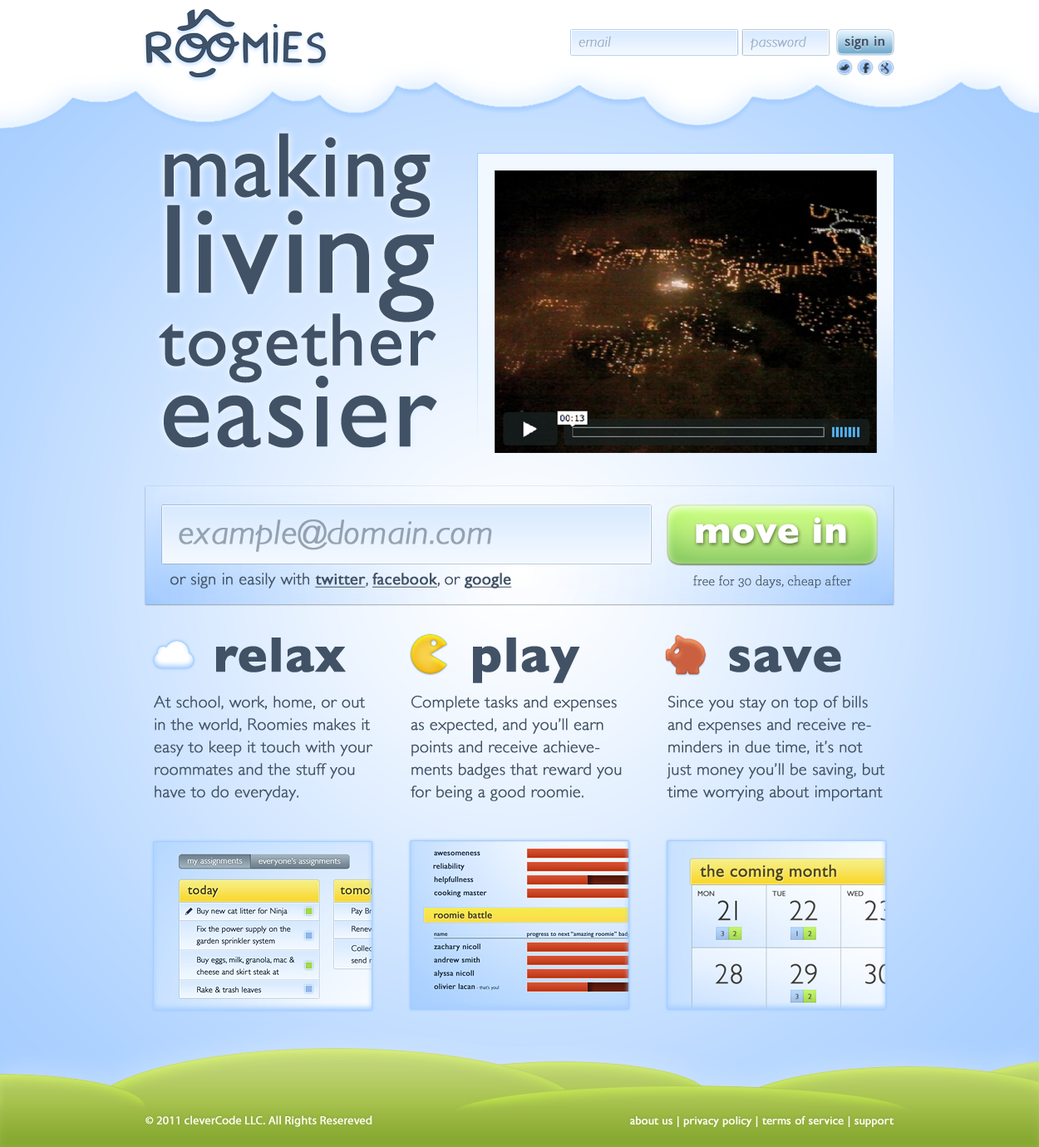
<style>
.page{position:relative;width:1039px;height:1147px}
.page>*{position:absolute;margin:0}
.t1{font:15px "GillSans-LightItalic";color:#96adca;font-weight:bold}
.t2{font:15px "GillSans";color:#425266;font-weight:bold}
.t3{font:74.8px/72.8px "GillSans";color:#425266;font-weight:bold}
.t4{font:91.5px/54.5px "GillSans";color:#425266;font-weight:bold}
.t5{font:127.2px/96.1px "GillSans";color:#425266;font-weight:bold}
.t6{font:109.7px/81.1px "GillSans";color:#425266;font-weight:bold}
.t7{font:34.9px "GillSans-LightItalic";color:#94a1b2;font-weight:bold}
.t8{font:36.6px "GillSans-Bold";color:#ffffff;font-weight:bold}
.t9{font:16.6px "GillSans-Light";color:#425266;font-weight:bold}
.t10{font:16.6px "GillSans";color:#425266;font-weight:bold;text-decoration:underline}
.t11{font:13.3px "Archer-Light";color:#425266;font-weight:bold}
.t12{font:49.9px "GillSans-Bold";color:#425266;font-weight:bold}
.t13{font:16.6px/22.4px "GillSans-Light";color:#425266;font-weight:bold}
.t14{font:11.6px "MyriadPro-Regular";color:#f9ffe5;font-weight:bold}
.t15{font:11.6px "GillSans";color:#f9ffe5;font-weight:bold}
</style>
<div class="page">
<p class="t1" style="left:579px;top:36px;width:32px;height:11px">email</p>
<p class="t1" style="left:751px;top:36px;width:55px;height:15px">password</p>
<p class="t2" style="left:845px;top:36px;width:40px;height:14px">sign in</p>
<p class="t3" style="left:159px;top:133px;width:278px;height:315px"><span class="t4">making<br></span><span class="t5">living<br></span>together<br><span class="t6">easier</span></p>
<p class="t7" style="left:179px;top:520px;width:313px;height:32px">example@domain.com</p>
<p class="t8" style="left:696px;top:517px;width:150px;height:27px">move in</p>
<p class="t9" style="left:170px;top:573px;width:342px;height:16px">or sign in easily with <span class="t10">twitter</span>, <span class="t10">facebook</span>, or <span class="t10">google</span></p>
<p class="t11" style="left:693px;top:575px;width:158px;height:14px">free for 30 days, cheap after</p>
<p class="t12" style="left:216px;top:638px;width:130px;height:35px">relax</p>
<p class="t12" style="left:473px;top:638px;width:107px;height:45px">play</p>
<p class="t12" style="left:729px;top:646px;width:112px;height:27px">save</p>
<p class="t13" style="left:154px;top:696px;width:219px;height:105px">At school, work, home, or out in the world, Roomies makes it easy to keep it touch with your roommates and the stuff you have to do everyday.</p>
<p class="t13" style="left:411px;top:696px;width:211px;height:105px">Complete tasks and expenses as expected, and you’ll earn points and receive achievements badges that reward you for being a good roomie.</p>
<p class="t13" style="left:667px;top:696px;width:218px;height:105px">Since you stay on top of bills and expenses and receive reminders in due time, it’s not just money you’ll be saving, but time worrying about important</p>
<p class="t14" style="left:145px;top:1116px;width:227px;height:11px">© 2011 cleverCode LLC. All Rights Resereved</p>
<p class="t15" style="left:630px;top:1116px;width:265px;height:11px">about us | privacy policy | terms of service | support</p>
</div>
